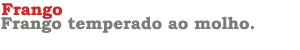
<style>
.page{position:relative;width:300px;height:50px;background:#ffffff}
.page>*{position:absolute;margin:0}
.t1{font:17px "BookmanOldStyle-Bold";color:#d42525}
.t2{font:17px "BookmanOldStyle-Bold";color:#7c7c79}
</style>
<div class="page">
<p class="t1" style="left:2px;top:3px;width:60px;height:16px">Frango</p>
<p class="t2" style="left:1px;top:16px;width:254px;height:17px">Frango temperado ao molho.</p>
</div>
